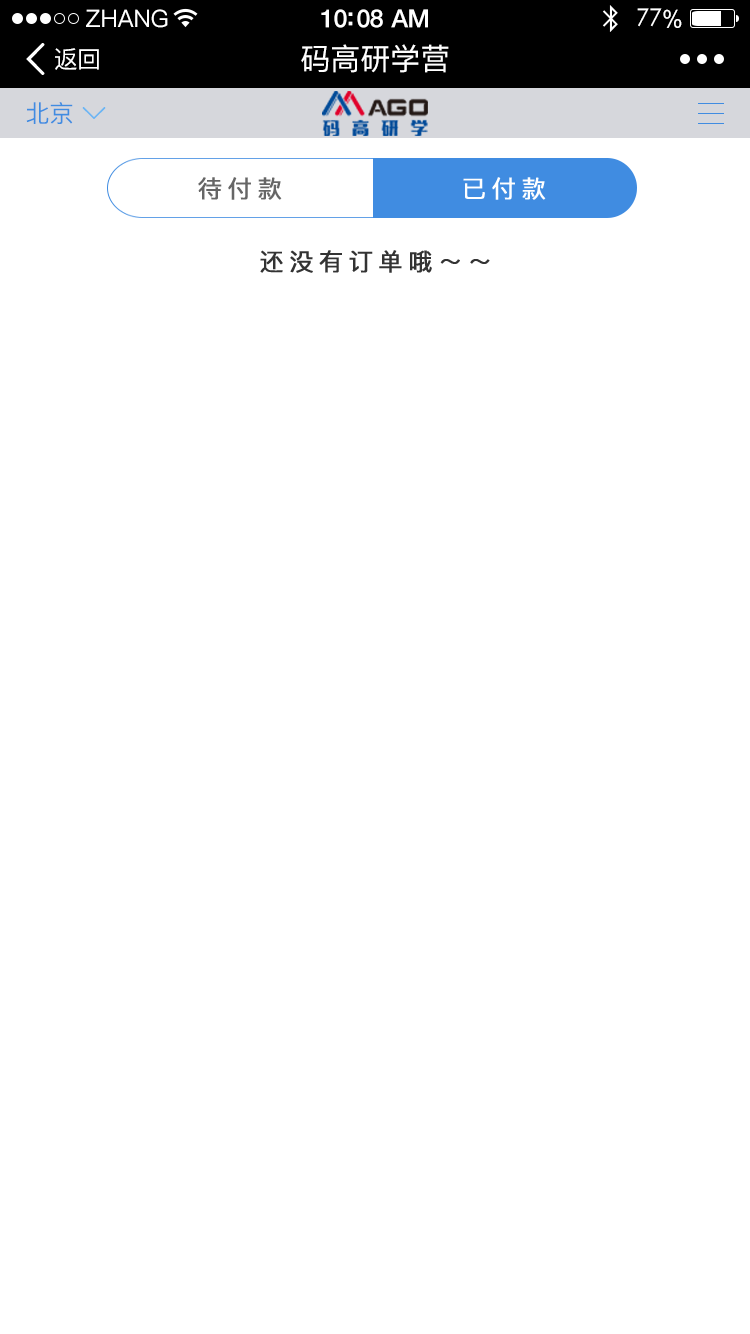
<style>
.page{position:relative;width:750px;height:1334px;background:#ffffff}
.page>*{position:absolute;margin:0}
.t1{font:24px "PingFang-SC-Medium";color:#ffffff}
.t2{font:25px "HelveticaNeue-Medium";letter-spacing:-0.02em;color:#ffffff}
.t3{font:24px "STXihei";letter-spacing:-0.02em;color:#ffffff}
.t4{font:24px "ArialUnicodeMS";letter-spacing:-0.02em;color:#ffffff}
.t5{font:24px "PingFang-SC-Medium";letter-spacing:-0.02em;color:#ffffff}
.t6{font:30px "PingFang-SC-Medium";color:#ffffff}
.t7{font:24px "PingFang-SC-Medium";color:#408ce1}
.t8{font:24px "PingFang-SC-Medium";letter-spacing:0.2em;color:#666666;font-weight:bold}
.t9{font:24px "PingFang-SC-Medium";letter-spacing:0.2em;color:#ffffff;font-weight:bold}
.t10{font:24px "PingFang-SC-Medium";letter-spacing:0.2em;color:#333333;font-weight:bold}
</style>
<div class="page">
<p class="t1" style="left:86px;top:9px;width:82px;height:19px">ZHANG</p>
<p class="t2" style="left:321px;top:9px;width:107px;height:19px">10:08 AM</p>
<p class="t3" style="left:637px;top:8px;width:45px;height:20px">77<span class="t4">%</span></p>
<p class="t5" style="left:55px;top:48px;width:44px;height:22px">返回</p>
<p class="t6" style="left:301px;top:44px;width:148px;height:29px">码高研学营</p>
<p class="t7" style="left:26px;top:102px;width:47px;height:22px">北京</p>
<p class="t8" style="left:198px;top:177px;width:84px;height:23px">待付款</p>
<p class="t9" style="left:463px;top:177px;width:83px;height:23px">已付款</p>
<p class="t10" style="left:260px;top:250px;width:230px;height:23px">还没有订单哦～～</p>
</div>
